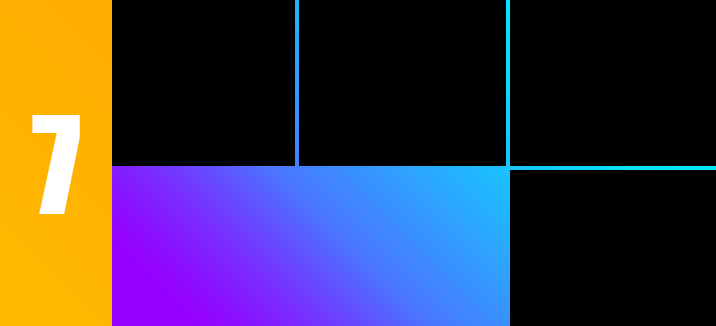
<style>
.page{position:relative;width:716px;height:326px;background:#000000}
.page>*{position:absolute;margin:0}
.t1{font:125px "Impact";color:#ffffff}
</style>
<div class="page">
<p class="t1" style="left:32px;top:115px;width:48px;height:99px">7</p>
</div>
